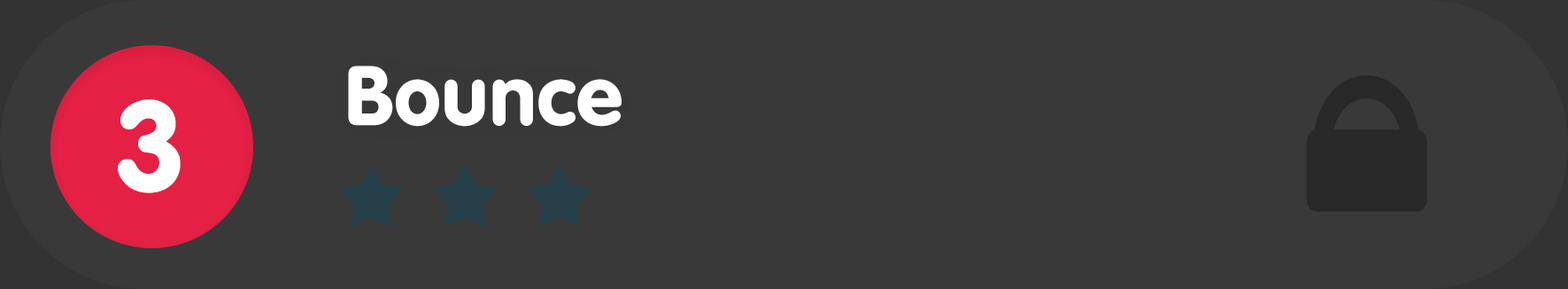
<style>
.page{position:relative;width:1568px;height:289px;background:#393939}
.page>*{position:absolute;margin:0}
.t1{font:88.5px "VAGRundschriftD";color:#ffffff}
.t2{font:132.8px "VAGRundschriftD";color:#ffffff}
</style>
<div class="page">
<p class="t1" style="left:348px;top:66px;width:274px;height:61px">Bounce</p>
<p class="t2" style="left:118px;top:99px;width:63px;height:94px">3</p>
</div>
